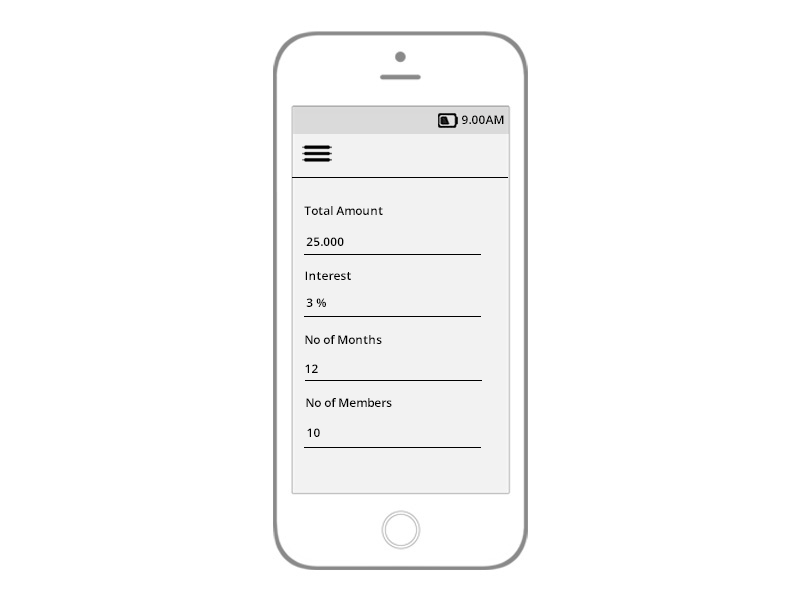
<style>
.page{position:relative;width:800px;height:600px;background:#ffffff}
.page>*{position:absolute;margin:0}
.t1{font:12px "OpenSans-Semibold";color:#000000}
</style>
<div class="page">
<p class="t1" style="left:462px;top:115px;width:42px;height:9px">9.00AM</p>
<p class="t1" style="left:304px;top:206px;width:79px;height:9px">Total Amount</p>
<p class="t1" style="left:306px;top:237px;width:38px;height:9px">25.000</p>
<p class="t1" style="left:305px;top:271px;width:46px;height:9px">Interest</p>
<p class="t1" style="left:306px;top:298px;width:20px;height:9px">3 %</p>
<p class="t1" style="left:305px;top:335px;width:77px;height:9px">No of Months</p>
<p class="t1" style="left:305px;top:364px;width:13px;height:9px">12</p>
<p class="t1" style="left:306px;top:398px;width:86px;height:9px">No of Members</p>
<p class="t1" style="left:307px;top:428px;width:13px;height:9px">10</p>
</div>
